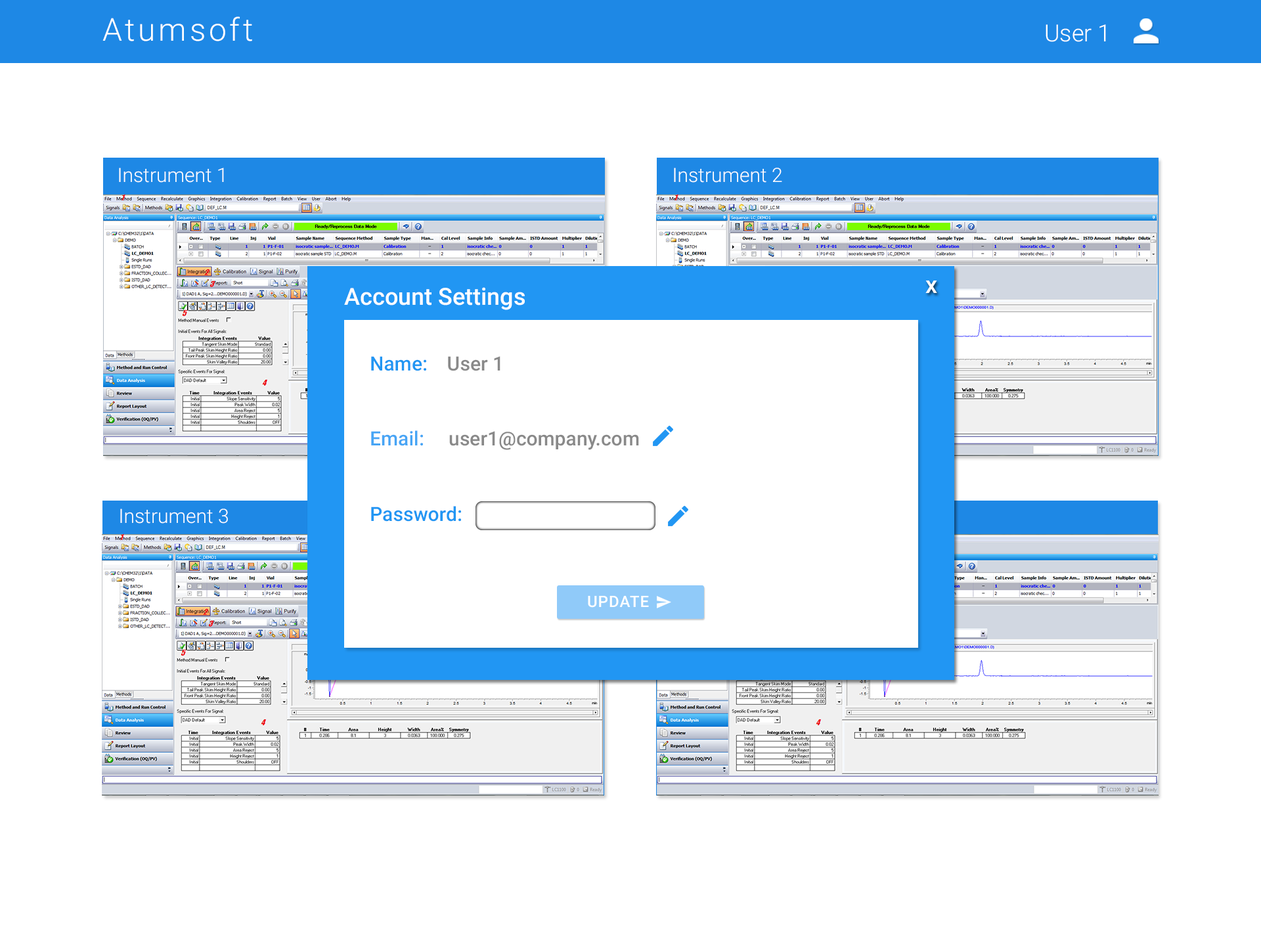
<style>
.page{position:relative;width:1261px;height:946px;background:#ffffff}
.page>*{position:absolute;margin:0}
.t1{font:31.5px "Roboto-Light";letter-spacing:0.1em;color:#ffffff}
.t2{font:23.6px "Roboto-Light";color:#ffffff}
.t3{font:19.7px "Roboto-Light";color:#ffffff}
.t4{font:23.6px "Roboto-Medium";color:#ffffff}
.t5{font:19.7px "Roboto-Medium";color:#898989}
.t6{font:19.7px "Roboto-Medium";color:#2196f3}
.t7{font:19.7px "Roboto-Medium";color:#47a5f5}
.t8{font:15.8px "Roboto-Medium";letter-spacing:0.041em;color:#ffffff}
</style>
<div class="page">
<p class="t1" style="left:102px;top:16px;width:150px;height:25px">Atumsoft</p>
<p class="t2" style="left:1046px;top:24px;width:60px;height:18px">User 1</p>
<p class="t3" style="left:119px;top:167px;width:105px;height:16px">Instrument 1</p>
<p class="t3" style="left:674px;top:167px;width:108px;height:16px">Instrument 2</p>
<p class="t4" style="left:925px;top:280px;width:12px;height:13px">x</p>
<p class="t4" style="left:344px;top:287px;width:181px;height:23px">Account Settings</p>
<p class="t5" style="left:371px;top:356px;width:129px;height:15px"><span class="t6">Name:    </span>User 1</p>
<p class="t5" style="left:371px;top:430px;width:268px;height:20px"><span class="t7">Email:     </span>user1@company.com</p>
<p class="t3" style="left:120px;top:508px;width:108px;height:15px">Instrument 3</p>
<p class="t6" style="left:371px;top:506px;width:90px;height:15px">Password:</p>
<p class="t8" style="left:588px;top:596px;width:61px;height:11px">UPDATE</p>
</div>
